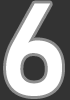
<style>
.page{position:relative;width:70px;height:100px;background:#333333}
.page>*{position:absolute;margin:0}
.t1{font:128.8px "Bahnschrift";color:#ffffff;scale:1.09 1}
</style>
<div class="page">
<p class="t1" style="left:6px;top:3px;width:56px;height:93px">6</p>
</div>
